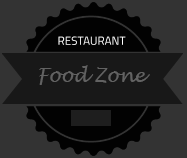
<style>
.page{position:relative;width:187px;height:158px;background:#333333}
.page>*{position:absolute;margin:0}
.t1{font:18.7px "LucidaHandwriting-Italic";color:#626262}
</style>
<div class="page">
<p class="t1" style="left:39px;top:65px;width:111px;height:20px">Food Zone</p>
</div>
